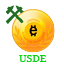
<style>
.page{position:relative;width:64px;height:64px;background:#ffffff}
.page>*{position:absolute;margin:0}
.t1{font:10px "Georgia";color:#09d313}
</style>
<div class="page">
<p class="t1" style="left:19px;top:55px;width:28px;height:7px">USDE</p>
</div>
